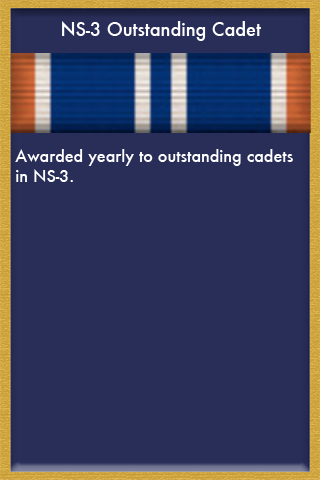
<style>
.page{position:relative;width:320px;height:480px;background:#292e59}
.page>*{position:absolute;margin:0}
.t1{font:18px "Futura-Medium";color:#ffffff}
.t2{font:16px "Futura-Medium";color:#ffffff}
</style>
<div class="page">
<p class="t1" style="left:62px;top:21px;width:199px;height:20px">NS-3 Outstanding Cadet</p>
<p class="t2" style="left:15px;top:149px;width:278px;height:33px">Awarded yearly to outstanding cadets <br>in NS-3.</p>
</div>
